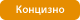
<style>
.page{position:relative;width:80px;height:20px;background:#e68d00}
.page>*{position:absolute;margin:0}
.t1{font:11px "MyriadPro-Semibold";color:#ffffff}
</style>
<div class="page">
<p class="t1" style="left:16px;top:5px;width:49px;height:10px">Концизно</p>
</div>
